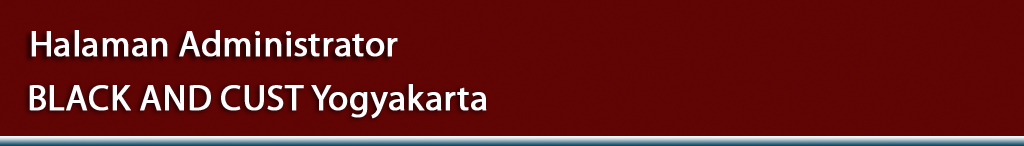
<style>
.page{position:relative;width:1024px;height:146px;background:#600404}
.page>*{position:absolute;margin:0}
.t1{font:36px "MyriadPro-Regular";color:#fcfdfe;font-weight:bold}
</style>
<div class="page">
<p class="t1" style="left:31px;top:30px;width:367px;height:27px">Halaman Administrator</p>
<p class="t1" style="left:29px;top:84px;width:458px;height:35px">BLACK AND CUST Yogyakarta</p>
</div>
